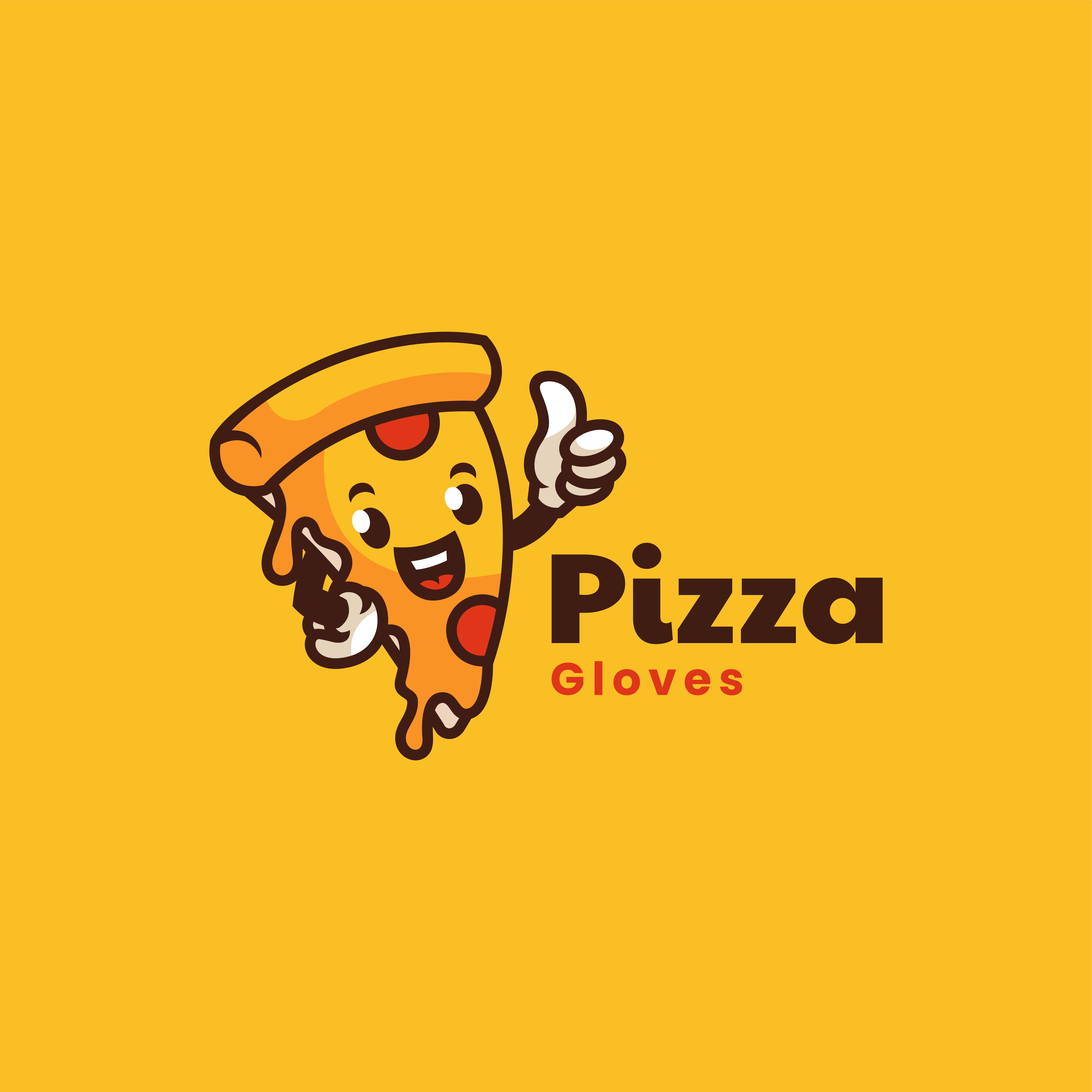
<style>
.page{position:relative;width:1092px;height:1092px;background:#fabf25}
.page>*{position:absolute;margin:0}
.t1{font:128.8px "PaytoneOne-Regular";color:#3f1d14}
.t2{font:45.7px "Poppins-Bold";letter-spacing:0.15em;color:#df3619}
</style>
<div class="page">
<p class="t1" style="left:551px;top:543px;width:332px;height:101px">Pizza</p>
<p class="t2" style="left:551px;top:661px;width:191px;height:34px">Gloves</p>
</div>
